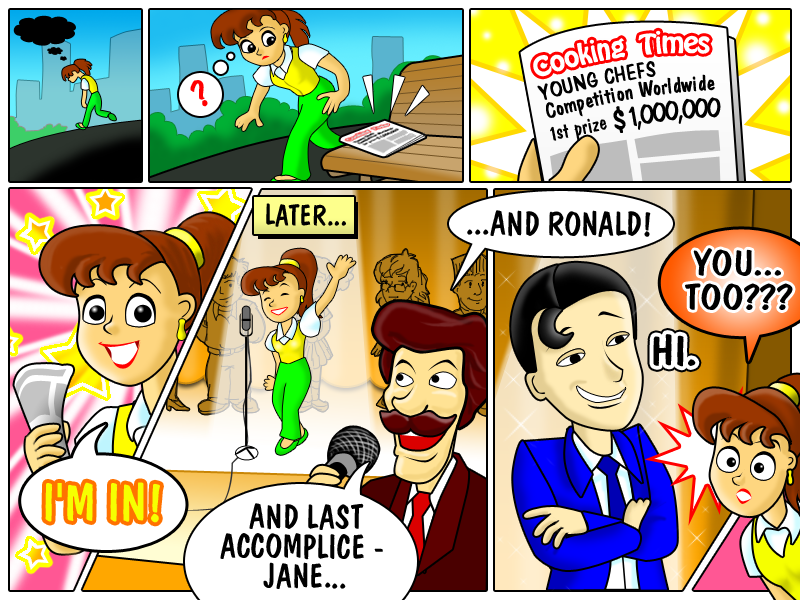
<style>
.page{position:relative;width:800px;height:600px}
.page>*{position:absolute;margin:0}
.t1{font:23.2px/18.9px "DomCasualBT-Regular";letter-spacing:-0.005em;color:#000000}
.t2{font:23.2px/18.9px "DomCasualBT-Regular";letter-spacing:-0.005em;color:#000000;text-transform:uppercase}
.t3{font:38.4px "DomCasualBT-Regular";letter-spacing:-0.005em;color:#ff0000}
.t4{font:31.4px "DomCasualBT-Regular";letter-spacing:-0.085em;color:#000000}
.t5{font:22.1px "DomCasualBT-Regular";letter-spacing:-0.005em;color:#000000}
.t6{font:29.4px "DomCasualBT-Regular";letter-spacing:-0.005em;color:#000000;text-transform:uppercase}
.t7{font:33.9px "DomCasualBT-Regular";letter-spacing:-0.005em;color:#000000;text-transform:uppercase}
.t8{font:36.3px/34.1px "DomCasualBT-Regular";letter-spacing:-0.005em;color:#000000;text-transform:uppercase;scale:1.17 1}
.t9{font:41.7px "DomCasualBT-Regular";letter-spacing:-0.005em;color:#000000;text-transform:uppercase;scale:1.19 1}
.t10{font:52.8px "DomCasualBT-Regular";letter-spacing:-0.005em;color:#f6ff00;text-transform:uppercase}
.t11{font:33.9px/29.7px "DomCasualBT-Regular";letter-spacing:-0.005em;color:#000000;text-transform:uppercase}
</style>
<div class="page">
<p class="t1" style="left:537px;top:61px;width:178px;height:57px;rotate:-10deg">Y<span class="t2">oung Chefs<br></span>Competition Worldwide</p>
<p class="t3" style="left:190px;top:80px;width:18px;height:27px;rotate:-32deg">?</p>
<p class="t4" style="left:613px;top:97px;width:108px;height:36px;rotate:-7deg">$ 1,000,000</p>
<p class="t5" style="left:550px;top:118px;width:57px;height:23px;rotate:-12deg">1st prize</p>
<p class="t6" style="left:266px;top:203px;width:80px;height:24px">Later...</p>
<p class="t7" style="left:467px;top:210px;width:184px;height:27px">...and Ronald!</p>
<p class="t8" style="left:685px;top:248px;width:108px;height:62px;text-align:center">You...<br>Too???</p>
<p class="t9" style="left:653px;top:334px;width:43px;height:33px">Hi.</p>
<p class="t10" style="left:45px;top:482px;width:115px;height:41px">I'm in!</p>
<p class="t11" style="left:220px;top:503px;width:163px;height:86px;text-align:center">And last<br>accomplice - <br>Jane...</p>
</div>
